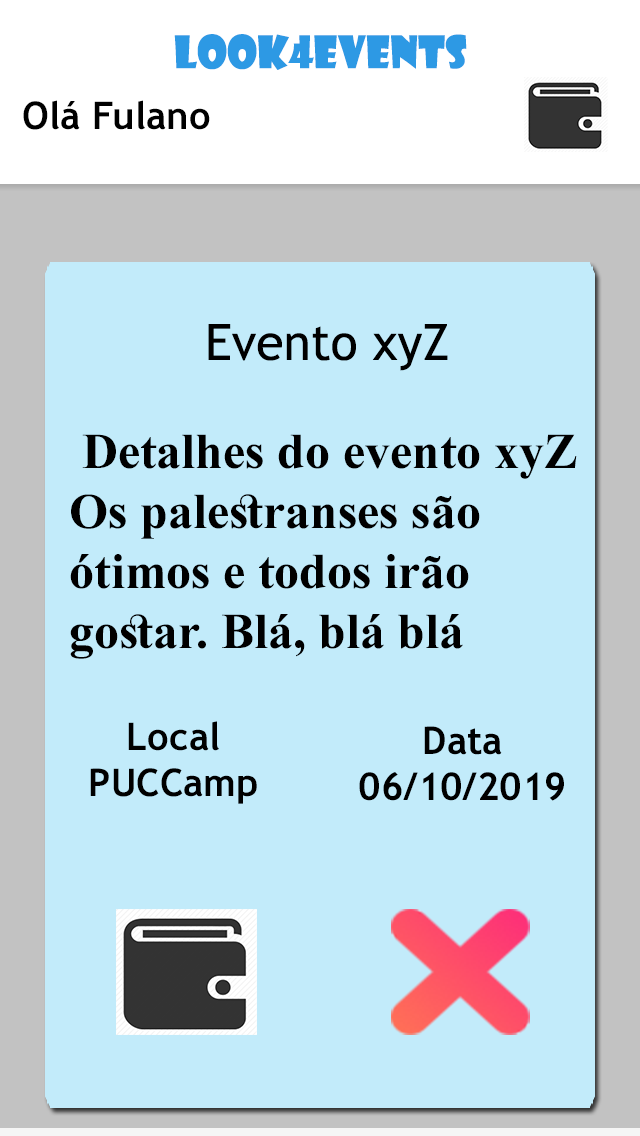
<style>
.page{position:relative;width:640px;height:1136px;background:#c2ebfa}
.page>*{position:absolute;margin:0}
.t1{font:43.6px "ShowcardGothic-Reg";color:#2d99e4}
.t2{font:38.1px "TrebuchetMS-Bold";color:#000000}
.t3{font:50px "TrebuchetMS";color:#000000}
.t4{font:50px "TimesNewRomanPS-BoldMT";color:#000000}
.t5{font:38.2px "TrebuchetMS-Bold";color:#000000}
.t6{font:38.4px "TrebuchetMS-Bold";color:#000000}
</style>
<div class="page">
<p class="t1" style="left:174px;top:34px;width:293px;height:36px">look4events</p>
<p class="t2" style="left:23px;top:100px;width:187px;height:30px">Olá Fulano</p>
<p class="t3" style="left:208px;top:324px;width:240px;height:47px">Evento xyZ</p>
<p class="t4" style="left:70px;top:434px;width:507px;height:225px;text-align:right">Detalhes do evento xyZ <br>Os palestranses são<br>ótimos e todos irão<br>gostar. Blá, blá blá</p>
<p class="t5" style="left:90px;top:721px;width:167px;height:83px;text-align:center">Local<br>PUCCamp</p>
<p class="t6" style="left:359px;top:726px;width:205px;height:75px;text-align:center">Data<br>06/10/2019</p>
</div>
